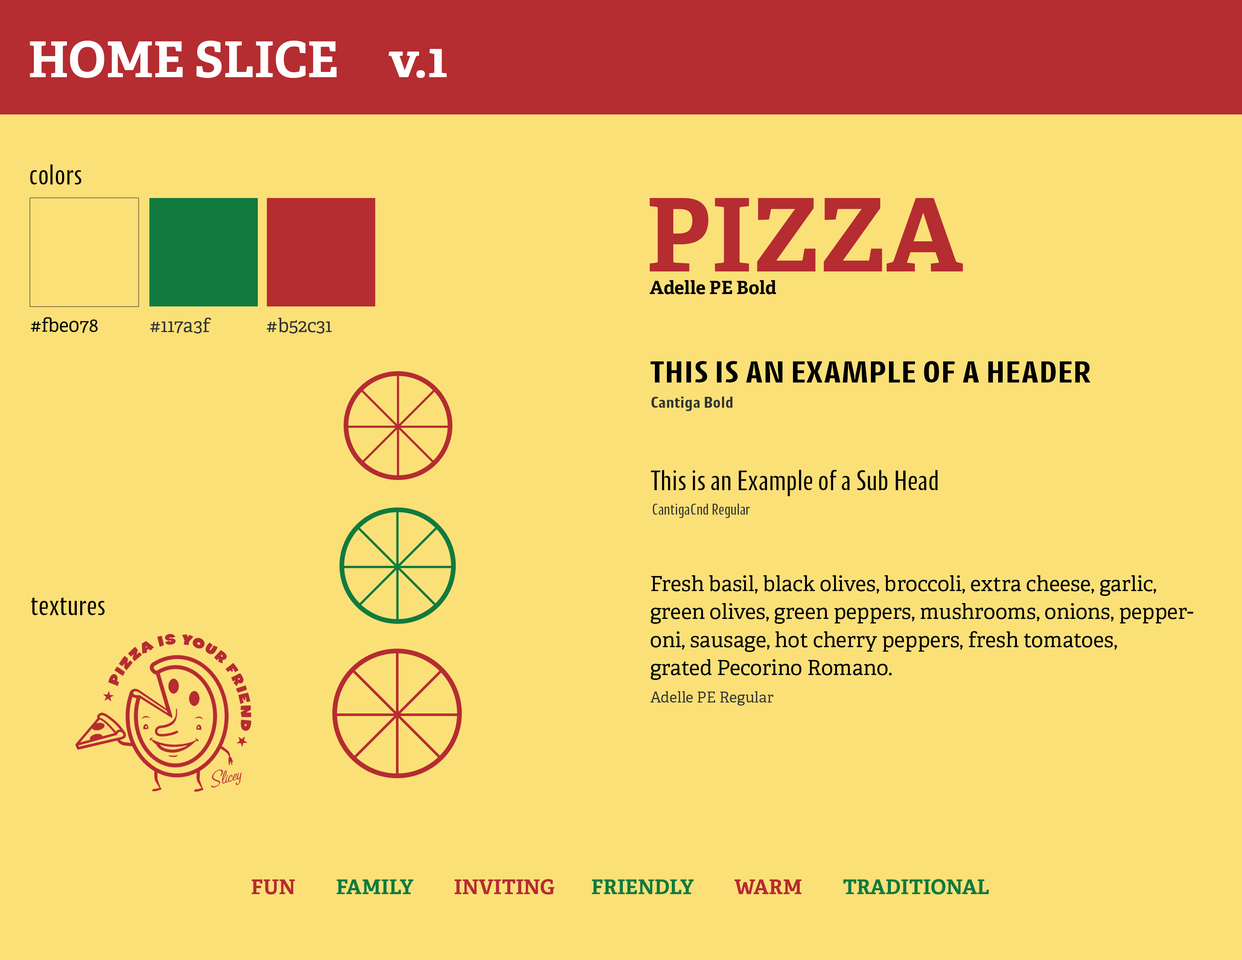
<style>
.page{position:relative;width:1242px;height:960px;background:#fbe078}
.page>*{position:absolute;margin:0}
.t1{font:49.3px "AdellePE-Bold";color:#fffffe}
.t2{font:28.2px "CantigaCnd";color:#030000}
.t3{font:101.3px "AdellePE-Bold";color:#b52c31}
.t4{font:18.4px "AdellePE-Bold";color:#000000}
.t5{font:18.8px "AdellePE";color:#020202}
.t6{font:18.8px "AdellePE";color:#333333}
.t7{font:18.8px "AdellePE";color:#313131}
.t8{font:30.8px "Cantiga-Bold";color:#000000}
.t9{font:15.8px "Cantiga-Bold";color:#333333}
.t10{font:28.6px "CantigaCnd";color:#010101}
.t11{font:15.8px "CantigaCnd";color:#333333}
.t12{font:20.9px/28px "AdellePE";color:#020202}
.t13{font:14.9px "AdellePE";color:#333333}
.t14{font:20.1px "AdellePE-Bold";color:#117a3f;text-transform:uppercase}
.t15{font:20.1px "AdellePE-Bold";color:#b52c31;text-transform:uppercase}
</style>
<div class="page">
<p class="t1" style="left:30px;top:41px;width:417px;height:37px">HOME SLICE     v.1</p>
<p class="t2" style="left:30px;top:164px;width:51px;height:20px">colors</p>
<p class="t3" style="left:650px;top:198px;width:313px;height:73px">PIZZA</p>
<p class="t4" style="left:650px;top:280px;width:126px;height:14px">Adelle PE Bold</p>
<p class="t5" style="left:30px;top:317px;width:68px;height:16px">#fbe078</p>
<p class="t6" style="left:150px;top:317px;width:61px;height:17px">#117a3f</p>
<p class="t7" style="left:267px;top:318px;width:65px;height:16px">#b52c31</p>
<p class="t8" style="left:650px;top:361px;width:441px;height:21px">THIS IS AN EXAMPLE OF A HEADER</p>
<p class="t9" style="left:652px;top:396px;width:81px;height:15px">Cantiga Bold</p>
<p class="t10" style="left:651px;top:470px;width:287px;height:26px">This is an Example of a Sub Head</p>
<p class="t11" style="left:653px;top:503px;width:97px;height:15px">CantigaCnd Regular</p>
<p class="t12" style="left:651px;top:575px;width:543px;height:105px">Fresh basil, black olives, broccoli, extra cheese, garlic, green olives, green peppers, mushrooms, onions, pepperoni, sausage, hot cherry peppers, fresh tomatoes,<br>grated Pecorino Romano.</p>
<p class="t2" style="left:31px;top:597px;width:74px;height:18px">textures</p>
<p class="t13" style="left:650px;top:691px;width:124px;height:14px">Adelle PE Regular</p>
<p class="t14" style="left:251px;top:879px;width:738px;height:15px"><span class="t15">FUN          </span>FAMILY          <span class="t15">INVITING         </span>FRIENDLY          <span class="t15">WARM          </span>TRADITIONAL</p>
</div>
